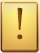
<style>
.page{position:relative;width:40px;height:53px}
.page>*{position:absolute;margin:0}
.t1{font:46.3px "Buenard-Regular";color:#8f5b23}
</style>
<div class="page">
<p class="t1" style="left:17px;top:7px;width:6px;height:33px">!</p>
</div>
